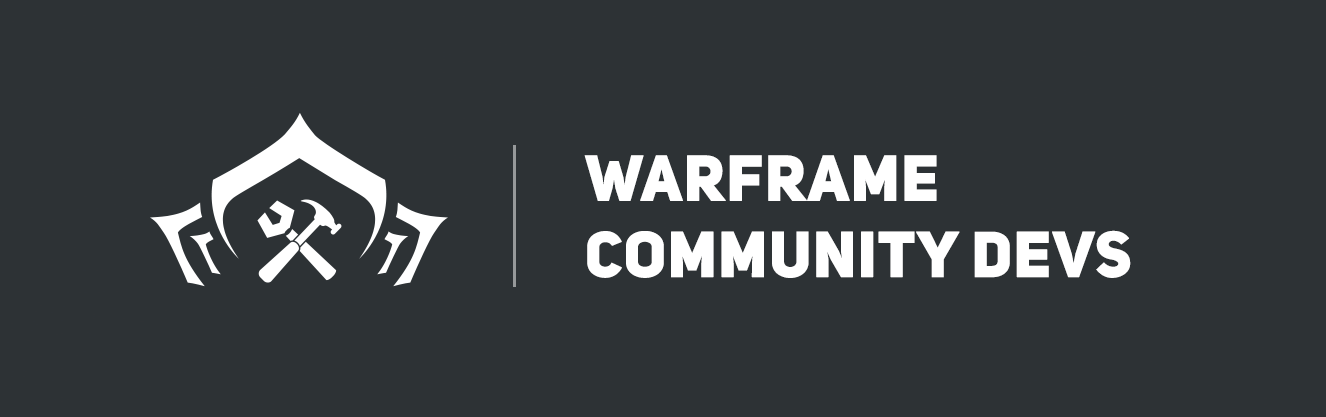
<style>
.page{position:relative;width:1326px;height:417px;background:#2d3235}
.page>*{position:absolute;margin:0}
.t1{font:63.6px "UniSansHeavyCAPS";color:#ffffff;font-weight:bold}
</style>
<div class="page">
<p class="t1" style="left:584px;top:155px;width:547px;height:123px">WARFRAME <br>COMMUNITY DEVS</p>
</div>
